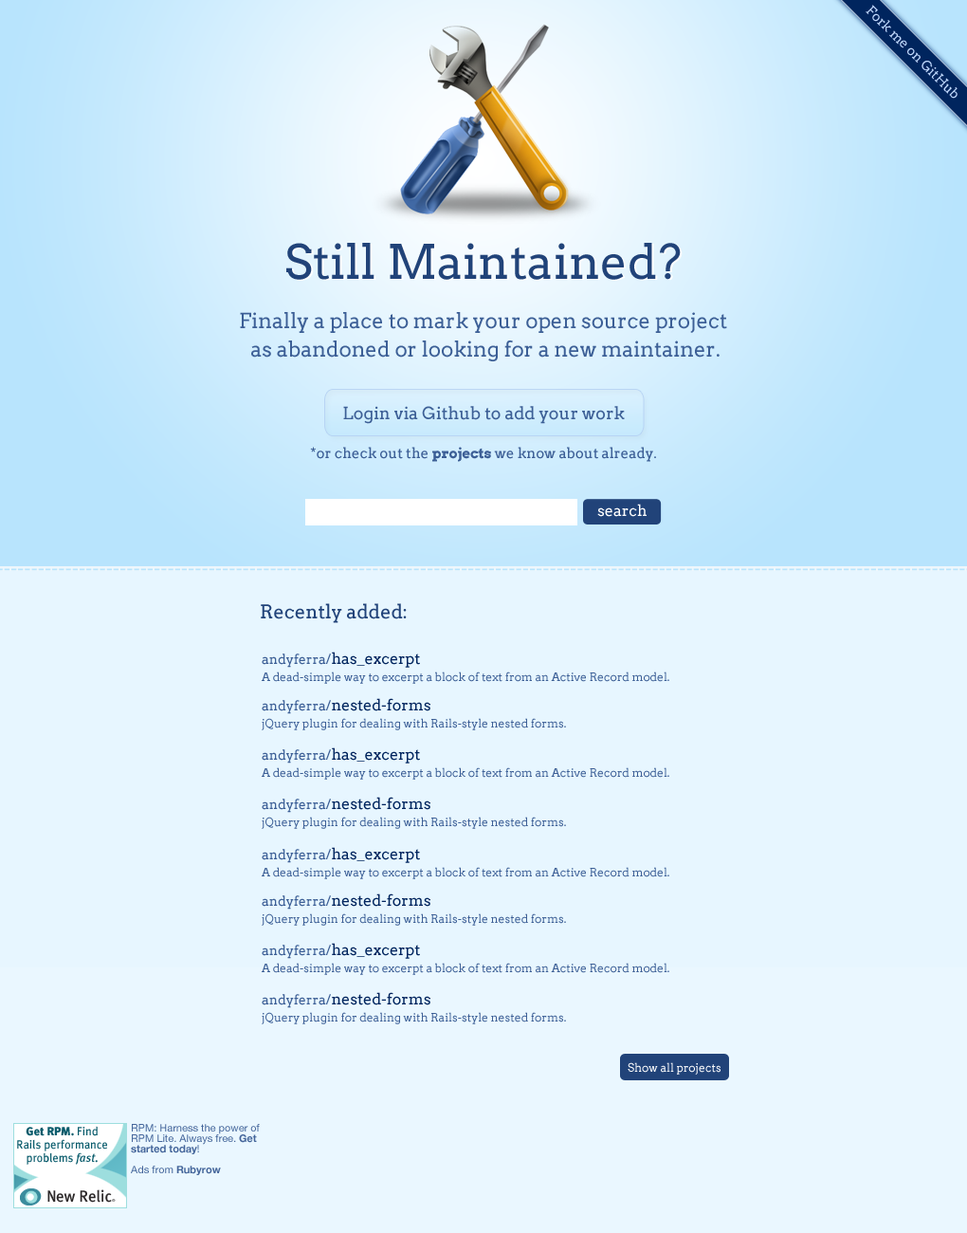
<style>
.page{position:relative;width:967px;height:1233px;background:#e7f6ff}
.page>*{position:absolute;margin:0}
.t1{font:47.4px "Arvo";color:#214379}
.t2{font:47.4px "Arvo"}
.t3{font:20.9px/28.4px "Arvo";color:#3c5f96}
.t4{font:17.1px "Arvo";color:#3c5f96}
.t5{font:14.2px "Arvo";color:#3c5f96}
.t6{font:14.2px "Arvo-Bold";color:#3c5f96}
.t7{font:15.2px "Arvo";color:#ffffff}
.t8{font:19px "Arvo";color:#214379}
.t9{font:11.4px/17.1px "Arvo";color:#3c5f96}
.t10{font:13.3px/17.1px "Arvo";color:#3c5f96}
.t11{font:15.2px/17.1px "Arvo";color:#00255e}
.t12{font:11.4px "Arvo";color:#ffffff}
.t13{font:10.4px/10.4px "HelveticaNeue";color:#3c5f96}
.t14{font:10.4px/10.4px "HelveticaNeue-Bold";color:#3c5f96}
</style>
<div class="page">
<p class="t1" style="left:286px;top:243px;width:395px;height:37px">Still Maintained?</p>
<p class="t2" style="left:288px;top:244px;width:395px;height:37px">Still Maintained?</p>
<p class="t3" style="left:240px;top:312px;width:487px;height:49px;text-align:center">Finally a place to mark your open source project <br>as abandoned or looking for a new maintainer.</p>
<p class="t4" style="left:343px;top:406px;width:282px;height:18px">Login via Github to add your work</p>
<p class="t5" style="left:310px;top:447px;width:346px;height:15px">*or check out the <span class="t6">projects</span> we know about already.</p>
<p class="t7" style="left:597px;top:504px;width:50px;height:13px">search</p>
<p class="t8" style="left:261px;top:603px;width:146px;height:20px">Recently added:</p>
<p class="t9" style="left:262px;top:651px;width:407px;height:33px"><span class="t10">andyferra/</span><span class="t11">has_excerpt<br></span>A dead-simple way to excerpt a block of text from an Active Record model.</p>
<p class="t9" style="left:262px;top:698px;width:304px;height:32px"><span class="t10">andyferra/</span><span class="t11">nested-forms<br></span>jQuery plugin for dealing with Rails-style nested forms.</p>
<p class="t9" style="left:262px;top:747px;width:407px;height:33px"><span class="t10">andyferra/</span><span class="t11">has_excerpt<br></span>A dead-simple way to excerpt a block of text from an Active Record model.</p>
<p class="t9" style="left:262px;top:797px;width:304px;height:32px"><span class="t10">andyferra/</span><span class="t11">nested-forms<br></span>jQuery plugin for dealing with Rails-style nested forms.</p>
<p class="t9" style="left:262px;top:847px;width:407px;height:32px"><span class="t10">andyferra/</span><span class="t11">has_excerpt<br></span>A dead-simple way to excerpt a block of text from an Active Record model.</p>
<p class="t9" style="left:262px;top:893px;width:304px;height:33px"><span class="t10">andyferra/</span><span class="t11">nested-forms<br></span>jQuery plugin for dealing with Rails-style nested forms.</p>
<p class="t9" style="left:262px;top:943px;width:407px;height:32px"><span class="t10">andyferra/</span><span class="t11">has_excerpt<br></span>A dead-simple way to excerpt a block of text from an Active Record model.</p>
<p class="t9" style="left:262px;top:992px;width:304px;height:32px"><span class="t10">andyferra/</span><span class="t11">nested-forms<br></span>jQuery plugin for dealing with Rails-style nested forms.</p>
<p class="t12" style="left:628px;top:1062px;width:93px;height:12px">Show all projects</p>
<p class="t13" style="left:131px;top:1124px;width:129px;height:51px">RPM: Harness the power of <br>RPM Lite. Always free. <span class="t14">Get <br>started today</span>!<br><br>Ads from <span class="t14">Rubyrow</span></p>
</div>
